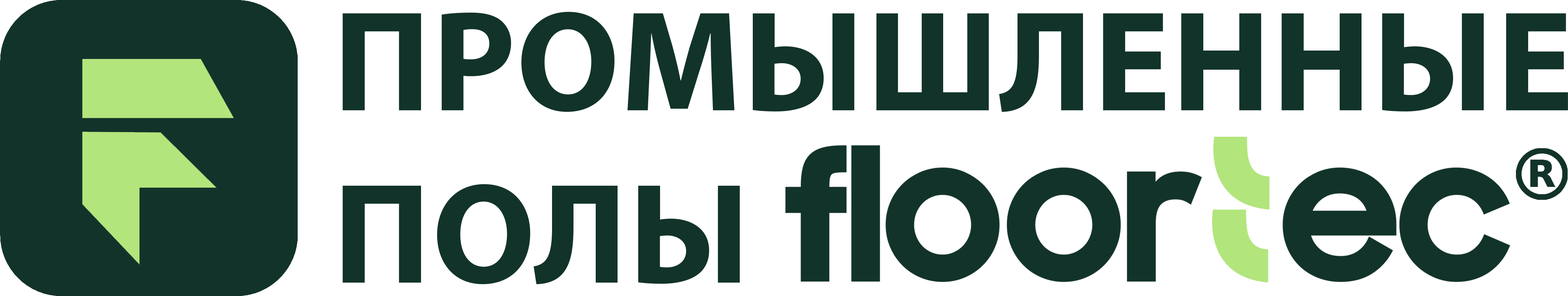
<style>
.page{position:relative;width:1568px;height:296px;background:#ffffff}
.page>*{position:absolute;margin:0}
.t1{font:143.7px "MyriadPro-Bold";letter-spacing:-0.01em;color:#12332a;text-transform:uppercase}
</style>
<div class="page">
<p class="t1" style="left:342px;top:11px;width:1226px;height:274px">промышленные<br>полы</p>
</div>
